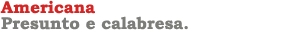
<style>
.page{position:relative;width:300px;height:50px;background:#ffffff}
.page>*{position:absolute;margin:0}
.t1{font:17px "BookmanOldStyle-Bold";color:#d42525}
.t2{font:17px "BookmanOldStyle-Bold";color:#7c7c79}
</style>
<div class="page">
<p class="t1" style="left:0px;top:0px;width:95px;height:14px">Americana</p>
<p class="t2" style="left:1px;top:16px;width:187px;height:14px">Presunto e calabresa.</p>
</div>
